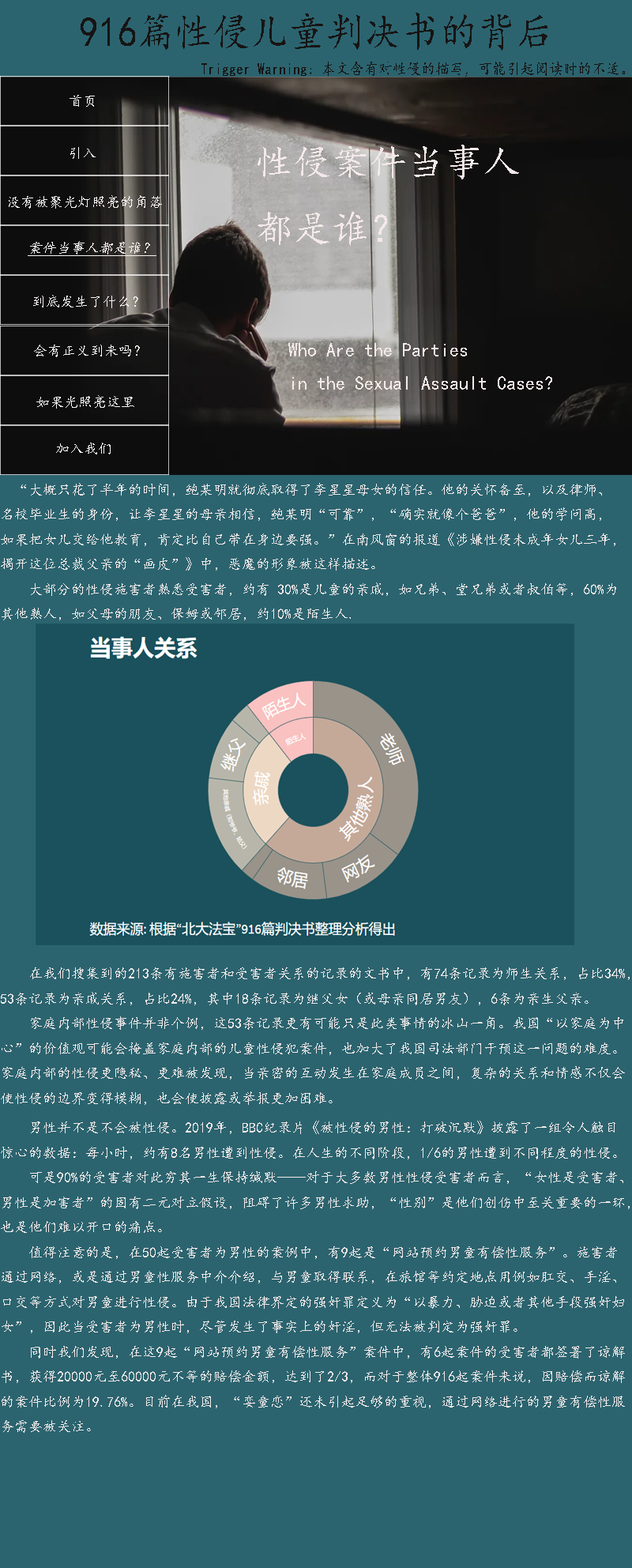
<style>
.page{position:relative;width:632px;height:1568px;background:#2b646f}
.page>*{position:absolute;margin:0}
.t1{font:42.2px "¿¬Ìå";color:#171414;scale:0.9 1}
.t2{font:15.8px "¿¬Ìå";color:#171414;scale:0.9 1}
.t3{font:14.2px "¿¬Ìå";color:#f9f5f5}
.t4{font:37.9px "¿¬Ìå";color:#f4e9e9}
.t5{font:14.2px "¿¬Ìå";color:#f9f5f5;font-style:italic;text-decoration:underline}
.t6{font:19px "¿¬Ìå";color:#f4e9e9}
.t7{font:14.2px "¿¬Ìå";color:#f4e9e9}
</style>
<div class="page">
<p class="t1" style="left:81px;top:13px;width:467px;height:38px">916篇性侵儿童判决书的背后</p>
<p class="t2" style="left:202px;top:62px;width:423px;height:15px">Trigger Warning：本文含有对性侵的描写，可能引起阅读时的不适。</p>
<p class="t3" style="left:70px;top:95px;width:25px;height:12px">首页</p>
<p class="t3" style="left:70px;top:147px;width:26px;height:12px">引入</p>
<p class="t4" style="left:258px;top:145px;width:261px;height:101px">性侵案件当事人<br>都是谁？</p>
<p class="t3" style="left:9px;top:195px;width:153px;height:14px">没有被聚光灯照亮的角落</p>
<p class="t5" style="left:28px;top:241px;width:128px;height:15px">案件当事人都是谁？</p>
<p class="t3" style="left:33px;top:295px;width:105px;height:13px">到底发生了什么？</p>
<p class="t3" style="left:34px;top:345px;width:106px;height:12px">会有正义到来吗？</p>
<p class="t6" style="left:288px;top:343px;width:264px;height:47px">Who Are the Parties<br>in the Sexual Assault Cases?</p>
<p class="t3" style="left:36px;top:395px;width:98px;height:14px">如果光照亮这里</p>
<p class="t3" style="left:56px;top:443px;width:55px;height:11px">加入我们</p>
<p class="t7" style="left:1px;top:483px;width:615px;height:137px"><span class="t6"><br></span>  “大概只花了半年的时间，鲍某明就彻底取得了李星星母女的信任。他的关怀备至，以及律师、<br>名校毕业生的身份，让李星星的母亲相信，鲍某明“可靠”，“确实就像个爸爸”，他的学问高，<br>如果把女儿交给他教育，肯定比自己带在身边要强。”在南风窗的报道《涉嫌性侵未成年女儿三年，<br>揭开这位总裁父亲的“画皮”》中，恶魔的形象被这样描述。<br>    大部分的性侵施害者熟悉受害者，约有 30%是儿童的亲戚，如兄弟、堂兄弟或者叔伯等，60%为<br>其他熟人，如父母的朋友、保姆或邻居，约10%是陌生人.</p>
<p class="t7" style="left:1px;top:967px;width:629px;height:138px">在我们搜集到的213条有施害者和受害者关系的记录的文书中，有74条记录为师生关系，占比34%，<br>53条记录为亲戚关系，占比24%，其中18条记录为继父女（或母亲同居男友），6条为亲生父亲。<br>    家庭内部性侵事件并非个例，这53条记录更有可能只是此类事情的冰山一角。我国“以家庭为中<br>心”的价值观可能会掩盖家庭内部的儿童性侵犯案件，也加大了我国司法部门干预这一问题的难度。<br>家庭内部的性侵更隐秘、更难被发现，当亲密的互动发生在家庭成员之间，复杂的关系和情感不仅会<br>使性侵的边界变得模糊，也会使披露或举报更加困难。</p>
<p class="t7" style="left:1px;top:1121px;width:629px;height:312px">男性并不是不会被性侵。2019年，BBC纪录片《被性侵的男性：打破沉默》披露了一组令人触目<br>惊心的数据：每小时，约有8名男性遭到性侵。在人生的不同阶段，1/6的男性遭到不同程度的性侵。<br>    可是90%的受害者对此穷其一生保持缄默——对于大多数男性性侵受害者而言，“女性是受害者、<br>男性是加害者”的固有二元对立假设，阻碍了许多男性求助，“性别”是他们创伤中至关重要的一环，<br>也是他们难以开口的痛点。<br>    值得注意的是，在50起受害者为男性的案例中，有9起是“网站预约男童有偿性服务”。施害者<br>通过网络，或是通过男童性服务中介介绍，与男童取得联系，在旅馆等约定地点用例如肛交、手淫、<br>口交等方式对男童进行性侵。由于我国法律界定的强奸罪定义为“以暴力、胁迫或者其他手段强奸妇<br>女”，因此当受害者为男性时，尽管发生了事实上的奸淫，但无法被判定为强奸罪。<br>    同时我们发现，在这9起“网站预约男童有偿性服务”案件中，有6起案件的受害者都签署了谅解<br>书，获得20000元至60000元不等的赔偿金额，达到了2/3，而对于整体916起案件来说，因赔偿而谅解<br>的案件比例为19.76%。目前在我国，“娈童恋”还未引起足够的重视，通过网络进行的男童有偿性服<br>务需要被关注。</p>
</div>
